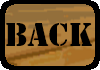
<style>
.page{position:relative;width:100px;height:70px;background:#000000}
.page>*{position:absolute;margin:0}
.t1{font:30px "StencilStd";color:#000000}
</style>
<div class="page">
<p class="t1" style="left:6px;top:23px;width:86px;height:23px">BACK</p>
</div>
